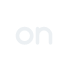
<style>
.page{position:relative;width:68px;height:68px;background:#ffffff}
.page>*{position:absolute;margin:0}
.t1{font:32.1px "Comfortaa-Bold";color:#ecf0f3}
</style>
<div class="page">
<p class="t1" style="left:15px;top:26px;width:38px;height:19px">on</p>
</div>
